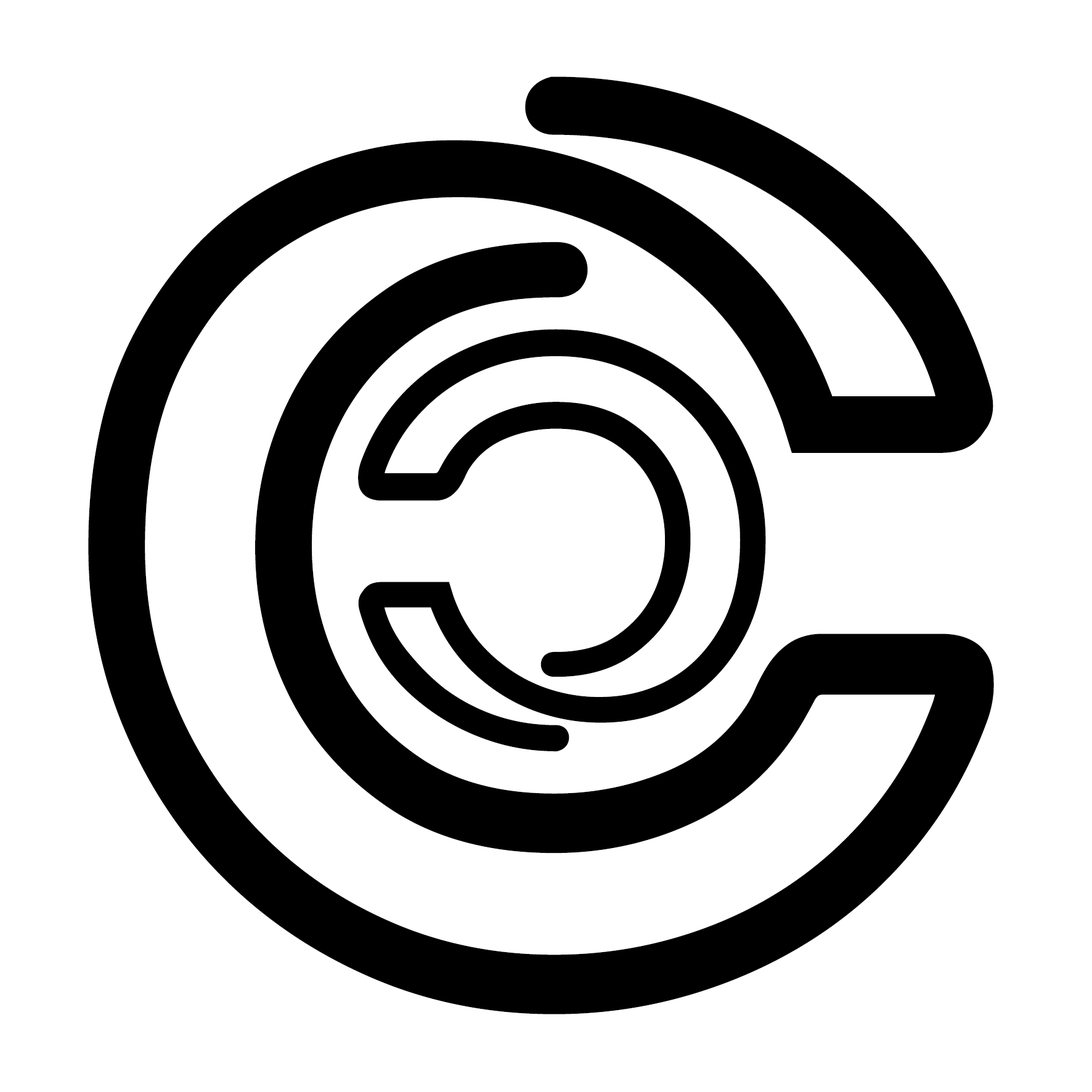
<style>
.page{position:relative;width:1092px;height:1092px;background:#ffffff}
.page>*{position:absolute;margin:0}
.t1{font:1413.9px "NEON";letter-spacing:0.05em;color:#000000;font-weight:bold}
.t2{font:636.3px "NEON";letter-spacing:0.05em;color:#000000;font-weight:bold}
</style>
<div class="page">
<p class="t1" style="left:88px;top:76px;width:906px;height:938px">c</p>
<p class="t2" style="left:358px;top:329px;width:408px;height:423px;rotate:180deg">c</p>
</div>
